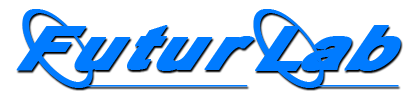
<style>
.page{position:relative;width:410px;height:100px;background:#ffffff}
.page>*{position:absolute;margin:0}
.t1{font:72px "13Misa";color:#007bff;font-weight:bold;font-style:italic;text-decoration:underline}
.t2{font:72px "13Misa";color:#007bff;font-weight:bold;font-style:italic}
</style>
<div class="page">
<p class="t1" style="left:16px;top:9px;width:385px;height:79px"><span class="t2">F</span>utur<span class="t2">L</span>ab</p>
</div>
